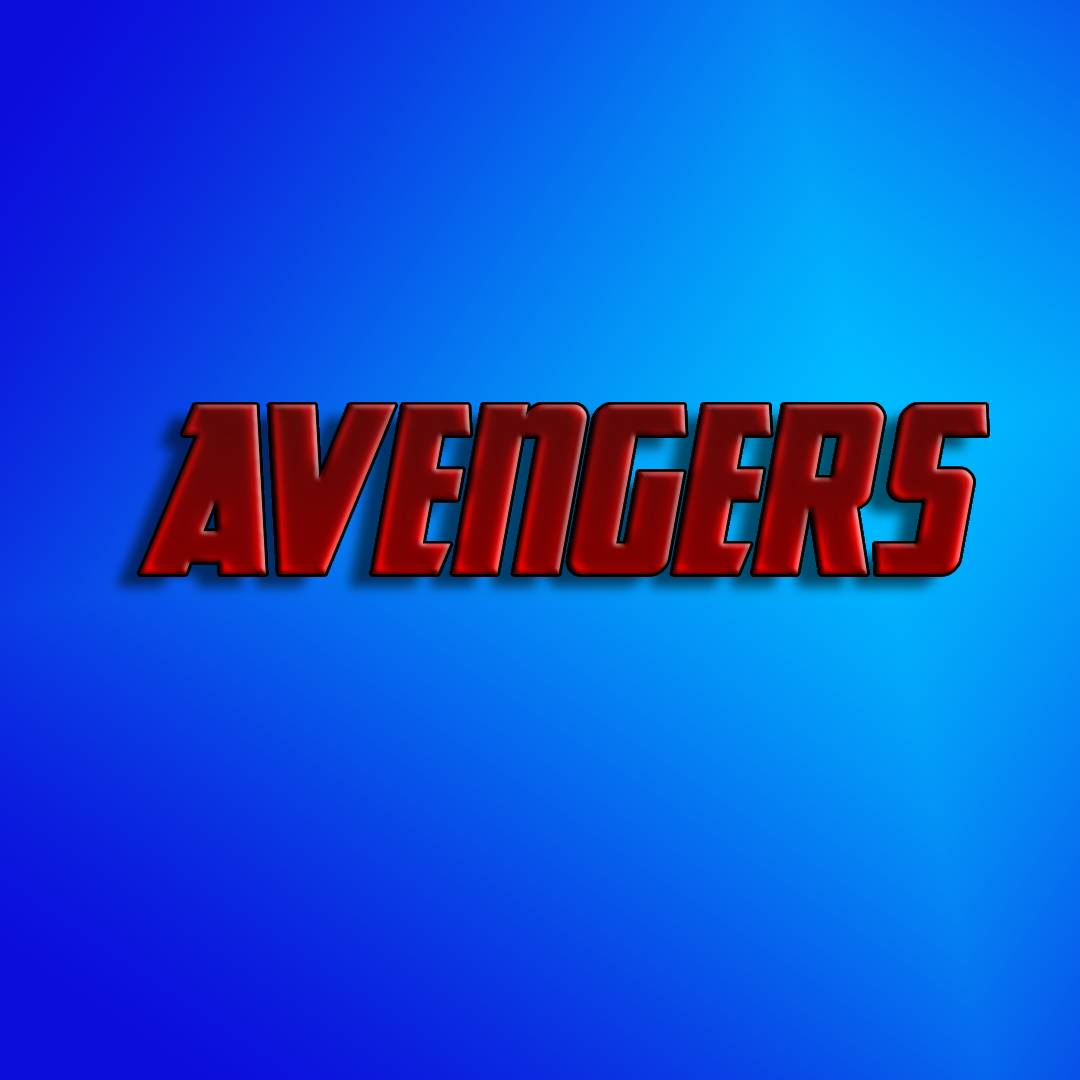
<style>
.page{position:relative;width:1080px;height:1080px}
.page>*{position:absolute;margin:0}
.t1{font:200px "GreatLakesNF";font-style:italic}
</style>
<div class="page">
<p class="t1" style="left:139px;top:404px;width:849px;height:170px">AVENGERS</p>
</div>
